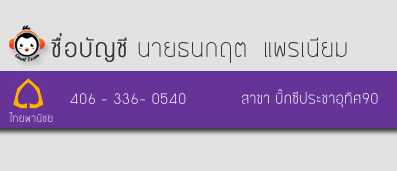
<style>
.page{position:relative;width:397px;height:171px;background:#e2e2e2}
.page>*{position:absolute;margin:0}
.t1{font:22.9px "BangnaNew";color:#333333}
.t2{font:22.9px "BangnaNew";color:#333333;font-weight:bold}
.t3{font:14px "BangnaNew";color:#ffffff}
.t4{font:10px "BangnaNew";color:#ffffff}
.t5{font:14px "BangnaNew";color:#663399}
</style>
<div class="page">
<p class="t1" style="left:51px;top:33px;width:296px;height:30px"><span class="t2">ชื่อบัญชี </span>นายธนกฤต  แพรเนียม</p>
<p class="t3" style="left:242px;top:89px;width:136px;height:19px">สาขา บิ๊กซีประชาอุทิศ90</p>
<p class="t3" style="left:70px;top:93px;width:116px;height:11px">406 - 336- 0540</p>
<p class="t4" style="left:9px;top:107px;width:45px;height:15px">ไทยพานิชย<span class="t5">์</span></p>
</div>
